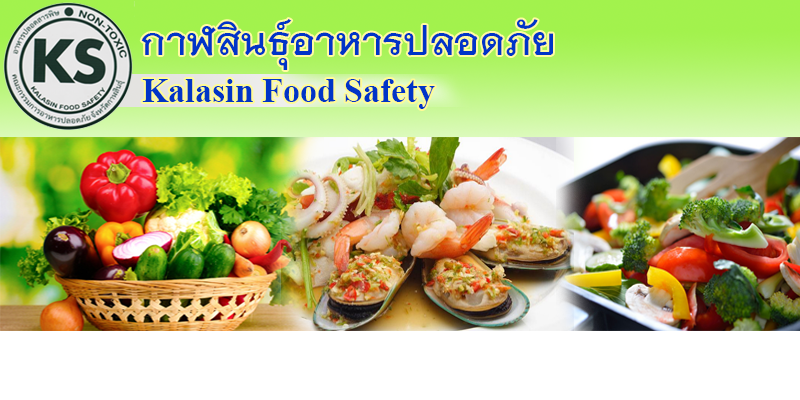
<style>
.page{position:relative;width:800px;height:400px}
.page>*{position:absolute;margin:0}
.t1{font:55px "THNiramitAS-Bold";color:#0134c7}
.t2{font:34px "TimesNewRomanPS-BoldMT";color:#0134c7}
</style>
<div class="page">
<p class="t1" style="left:141px;top:19px;width:412px;height:51px">กาฬสินธ์ุอาหารปลอดภัย</p>
<p class="t2" style="left:142px;top:79px;width:293px;height:30px">Kalasin Food Safety</p>
</div>
